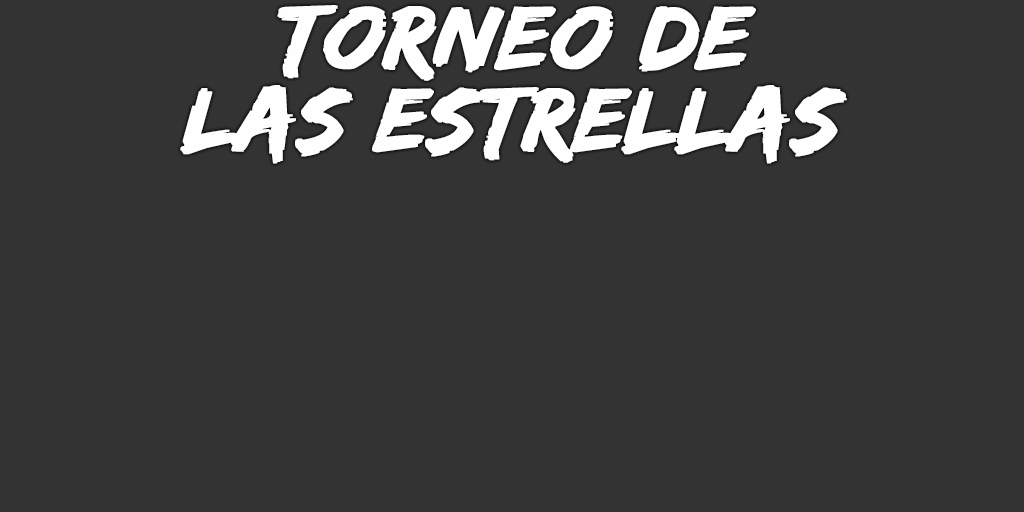
<style>
.page{position:relative;width:1024px;height:512px;background:#333333}
.page>*{position:absolute;margin:0}
.t1{font:93px/82px "EdoSZ";color:#fefefe;font-weight:bold;font-style:italic;scale:1.04 1}
</style>
<div class="page">
<p class="t1" style="left:180px;top:5px;width:667px;height:159px;text-align:center">torneo de<br>las estrellas</p>
</div>
